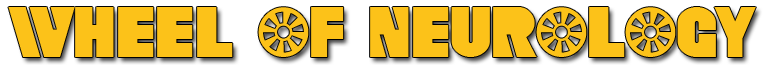
<style>
.page{position:relative;width:775px;height:71px;background:#fcc219}
.page>*{position:absolute;margin:0}
.t1{font:63.8px "SFFortuneWheel";letter-spacing:-0.025em;color:#fcc219}
</style>
<div class="page">
<p class="t1" style="left:8px;top:7px;width:748px;height:50px">WHEEL OF NEUROLOGY</p>
</div>
